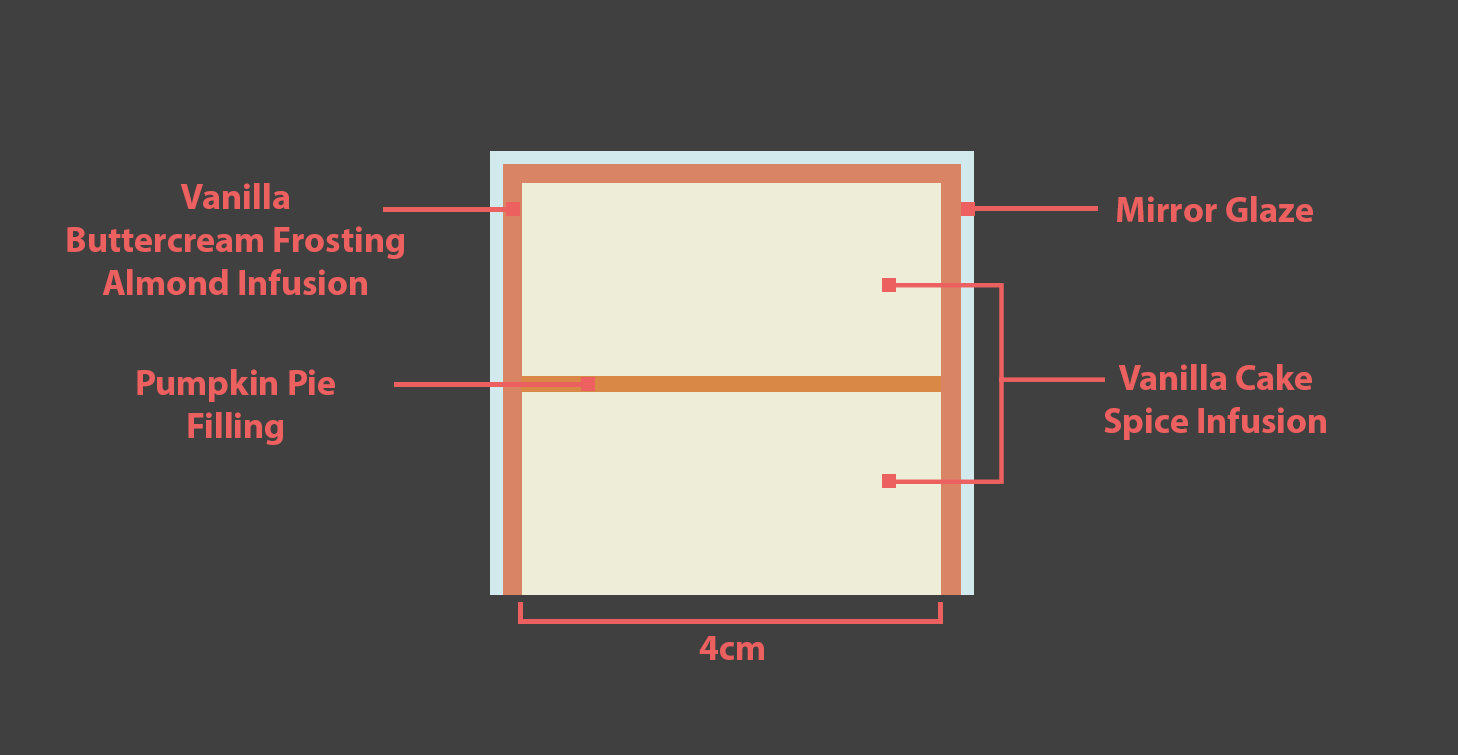
<style>
.page{position:relative;width:1458px;height:755px;background:#404040}
.page>*{position:absolute;margin:0}
.t1{font:36px "MyriadPro-Bold";color:#ec6060}
</style>
<div class="page">
<p class="t1" style="left:67px;top:183px;width:338px;height:112px;text-align:center">Vanilla<br>Buttercream Frosting<br>Almond Infusion</p>
<p class="t1" style="left:1117px;top:196px;width:196px;height:26px">Mirror Glaze</p>
<p class="t1" style="left:1104px;top:364px;width:222px;height:76px;text-align:center">Vanilla Cake<br>Spice Infusion</p>
<p class="t1" style="left:137px;top:369px;width:198px;height:76px;text-align:center">Pumpkin Pie<br>Filling</p>
<p class="t1" style="left:699px;top:636px;width:65px;height:24px">4cm</p>
</div>
